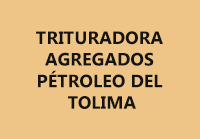
<style>
.page{position:relative;width:200px;height:139px;background:#eec586}
.page>*{position:absolute;margin:0}
.t1{font:18px "SegoeUI-Bold";color:#141414}
</style>
<div class="page">
<p class="t1" style="left:36px;top:31px;width:127px;height:78px;text-align:center">TRITURADORA <br>AGREGADOS <br>PÉTROLEO DEL <br>TOLIMA</p>
</div>
